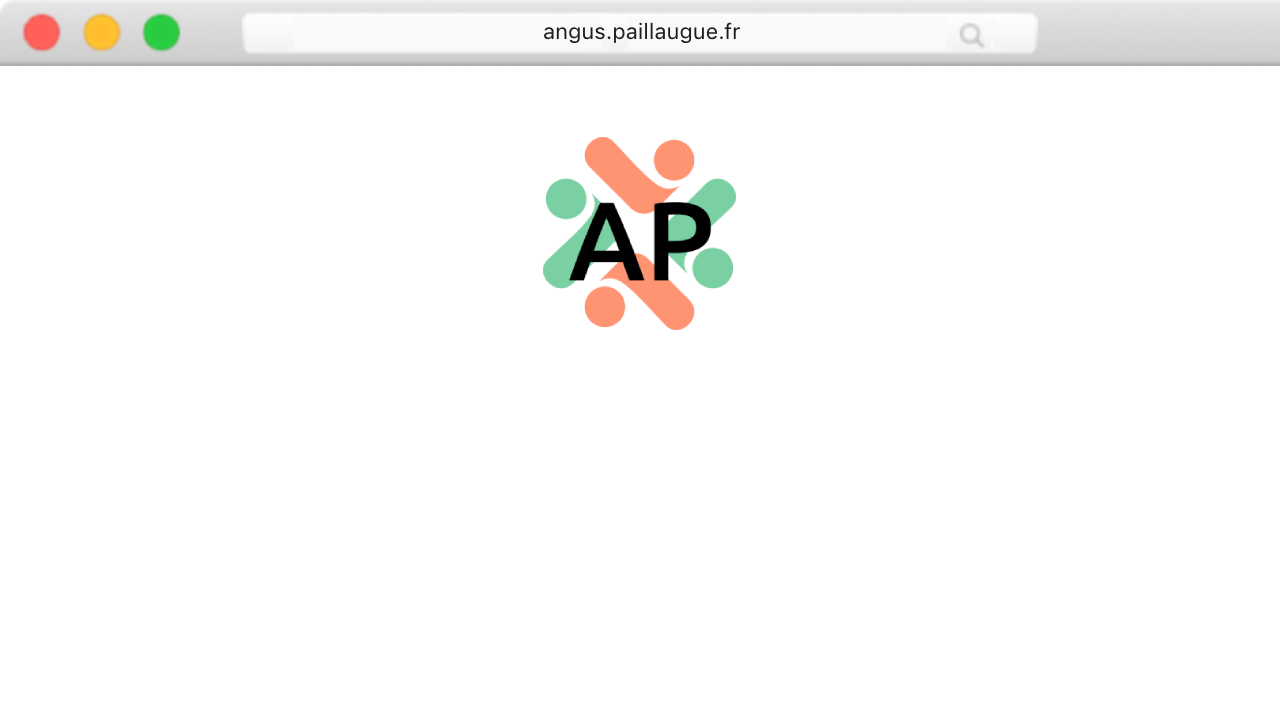
<style>
.page{position:relative;width:1280px;height:720px;background:#ffffff}
.page>*{position:absolute;margin:0}
.t1{font:22px "SFProText-Regular";color:#1f1f1f}
</style>
<div class="page">
<p class="t1" style="left:544px;top:22px;width:196px;height:22px">angus.paillaugue.fr</p>
</div>
